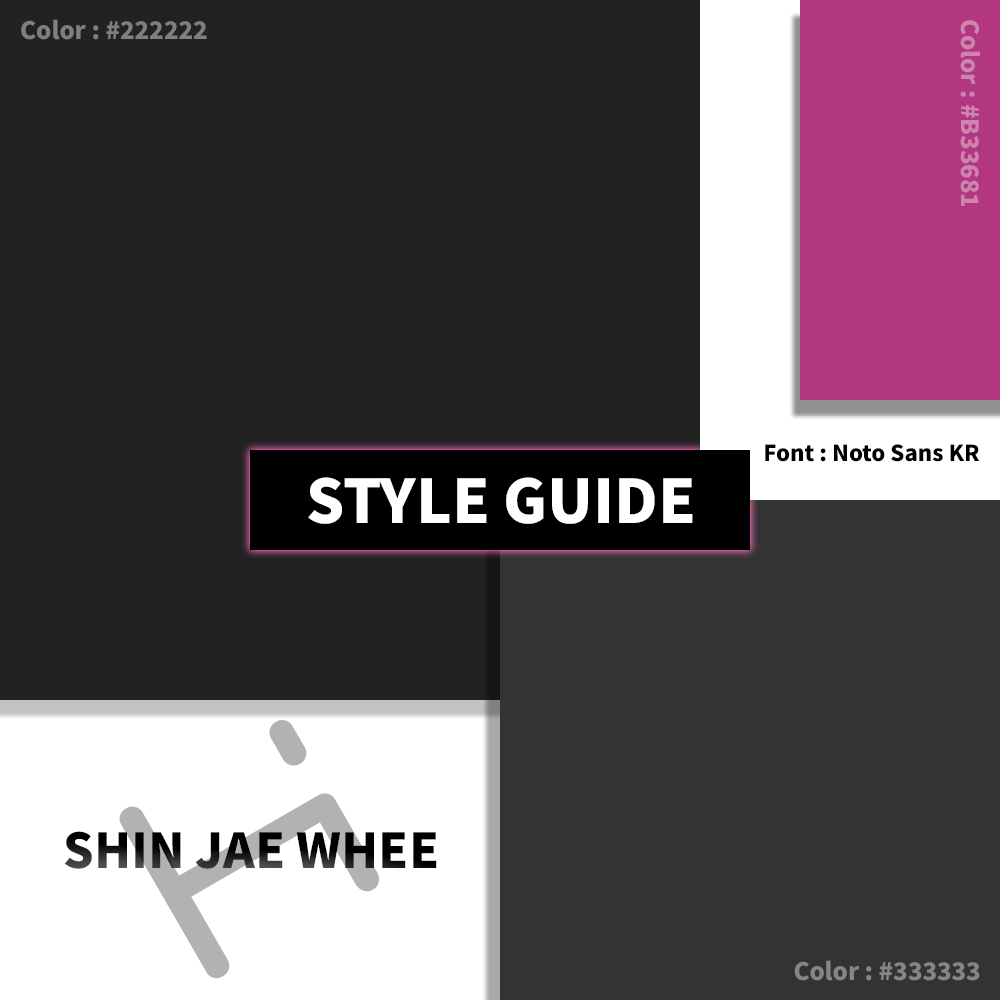
<style>
.page{position:relative;width:1000px;height:1000px;background:#222222}
.page>*{position:absolute;margin:0}
.t1{font:24px "NotoSansKR-Black";color:#7f7f7f}
.t2{font:23.9px "NotoSansKR-Black";color:#cc86ad}
.t3{font:22px "NotoSansKR-Black";color:#000000}
.t4{font:60px "NotoSansKR-Black";color:#ffffff}
.t5{font:48px "NotoSansKR-Black";color:#000000}
.t6{font:24px "NotoSansKR-Black";color:#858585}
</style>
<div class="page">
<p class="t1" style="left:21px;top:19px;width:186px;height:21px">Color : #222222</p>
<p class="t2" style="left:960px;top:20px;width:20px;height:186px;rotate:90deg">Color : #B33681</p>
<p class="t3" style="left:765px;top:444px;width:215px;height:18px">Font : Noto Sans KR</p>
<p class="t4" style="left:308px;top:477px;width:385px;height:47px">STYLE GUIDE</p>
<p class="t5" style="left:64px;top:831px;width:373px;height:38px">SHIN JAE WHEE</p>
<p class="t6" style="left:794px;top:960px;width:186px;height:21px">Color : #333333</p>
</div>
